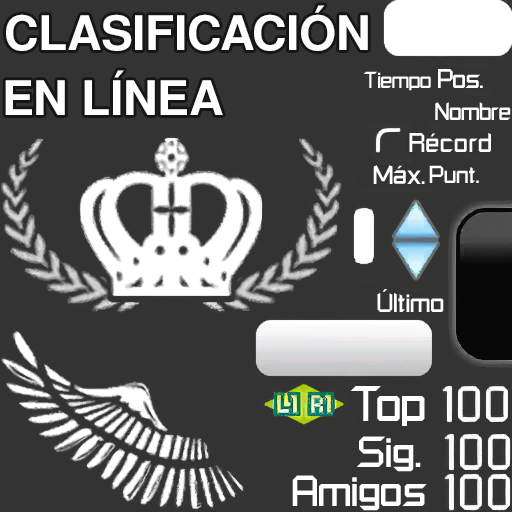
<style>
.page{position:relative;width:512px;height:512px;background:#333333}
.page>*{position:absolute;margin:0}
.t1{font:47.5px "NimbusSanL-Bol";color:#ffffff;text-transform:uppercase}
.t2{font:18.7px "RussellSquare";letter-spacing:-0.06em;color:#ffffff}
.t3{font:21.4px "RussellSquare";letter-spacing:-0.06em;color:#ffffff}
.t4{font:20.2px "RussellSquare";letter-spacing:-0.06em;color:#ffffff}
.t5{font:21.4px "RussellSquare";color:#ffffff}
.t6{font:21.4px "RussellSquare";letter-spacing:-0.04em;color:#ffffff}
.t7{font:19.5px "RussellSquare";letter-spacing:-0.04em;color:#ffffff}
.t8{font:40px "RussellSquare";letter-spacing:-0.04em;color:#ffffff}
.t9{font:35.1px "RussellSquare";letter-spacing:-0.04em;color:#ffffff}
</style>
<div class="page">
<p class="t1" style="left:6px;top:5px;width:362px;height:46px">Clasificación</p>
<p class="t1" style="left:5px;top:70px;width:218px;height:45px">en línea</p>
<p class="t2" style="left:363px;top:71px;width:68px;height:20px">Tiempo</p>
<p class="t3" style="left:438px;top:69px;width:45px;height:19px">Pos.</p>
<p class="t4" style="left:435px;top:102px;width:76px;height:18px">Nombre</p>
<p class="t5" style="left:409px;top:133px;width:82px;height:19px">Récord</p>
<p class="t6" style="left:373px;top:165px;width:52px;height:19px">Máx.</p>
<p class="t7" style="left:429px;top:165px;width:50px;height:18px">Punt.</p>
<p class="t6" style="left:377px;top:289px;width:67px;height:23px">Último</p>
<p class="t8" style="left:350px;top:386px;width:75px;height:40px">Top</p>
<p class="t9" style="left:356px;top:436px;width:65px;height:36px">Sig.</p>
<p class="t9" style="left:292px;top:475px;width:135px;height:36px">Amigos</p>
</div>
